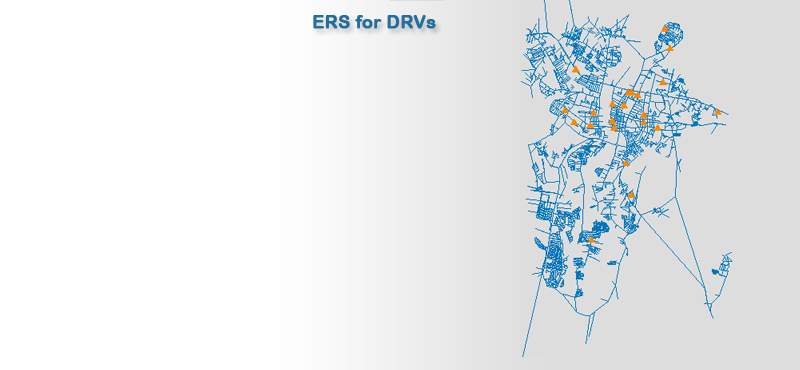
<style>
.page{position:relative;width:800px;height:370px;background:#ffffff}
.page>*{position:absolute;margin:0}
.t1{font:18px "ArialRoundedMTBold";color:#246e9b;font-weight:bold}
</style>
<div class="page">
<p class="t1" style="left:313px;top:15px;width:123px;height:14px">ERS for DRVs</p>
</div>
